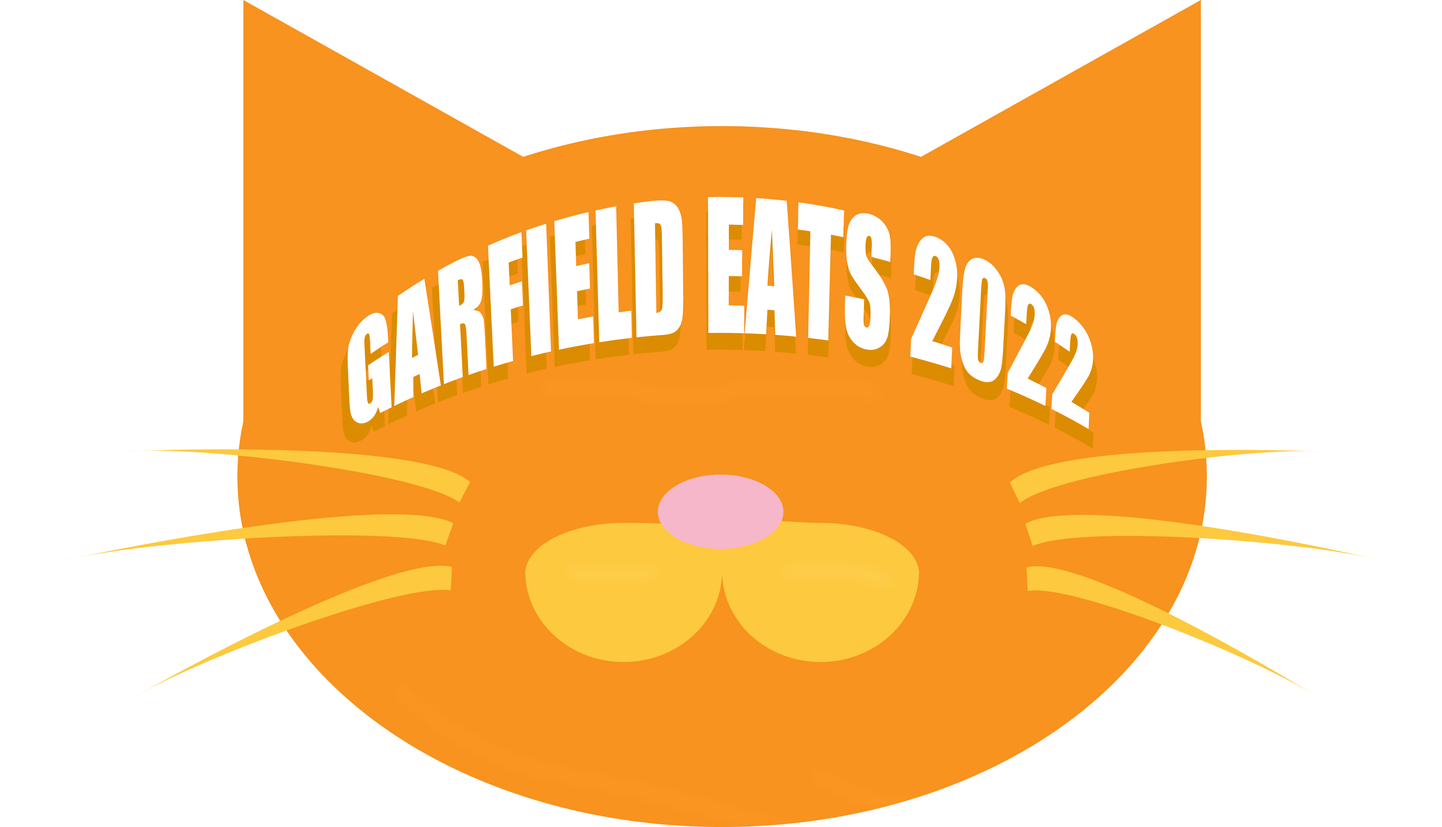
<style>
.page{position:relative;width:1442px;height:827px;background:#ffffff}
.page>*{position:absolute;margin:0}
.t1{font:91.6px "Impact";color:#ffffff}
.t2{font:93.1px "Impact"}
</style>
<div class="page">
<p class="t1" style="left:348px;top:197px;width:745px;height:232px;text-align:center">GARFIELD EATS 2022</p>
<p class="t2" style="left:341px;top:212px;width:756px;height:237px;text-align:center">GARFIELD EATS 2022</p>
</div>
